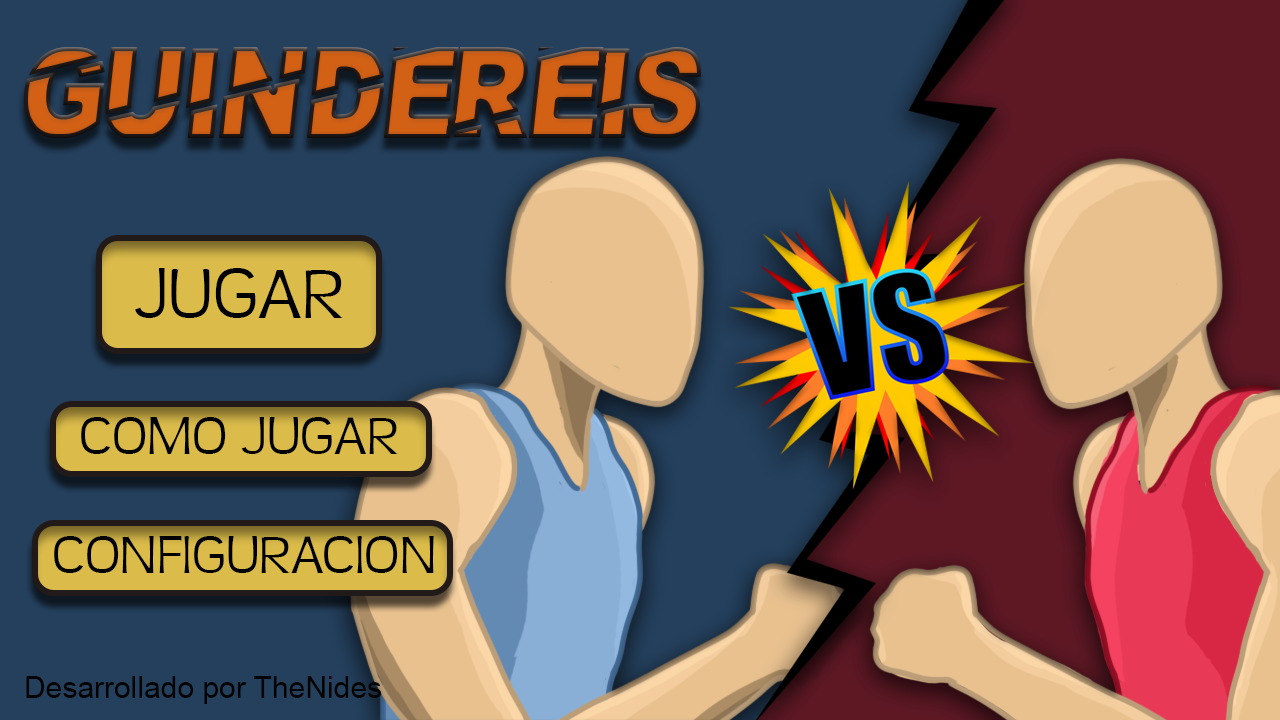
<style>
.page{position:relative;width:1280px;height:720px;background:#24405d}
.page>*{position:absolute;margin:0}
.t1{font:130.1px "PaybAck"}
.t2{font:72px "TeenLight-Regular";color:#000000}
.t3{font:54px "TeenLight-Regular";color:#000000}
.t4{font:30px "ArialMT";color:#030303}
</style>
<div class="page">
<p class="t1" style="left:24px;top:47px;width:677px;height:91px">GuinDeReis</p>
<p class="t2" style="left:135px;top:268px;width:208px;height:50px">JUGAR</p>
<p class="t3" style="left:81px;top:417px;width:317px;height:37px">COMO JUGAR</p>
<p class="t3" style="left:54px;top:536px;width:380px;height:37px">CONFIGURACION</p>
<p class="t4" style="left:26px;top:676px;width:355px;height:28px">Desarrollado por TheNides</p>
</div>
